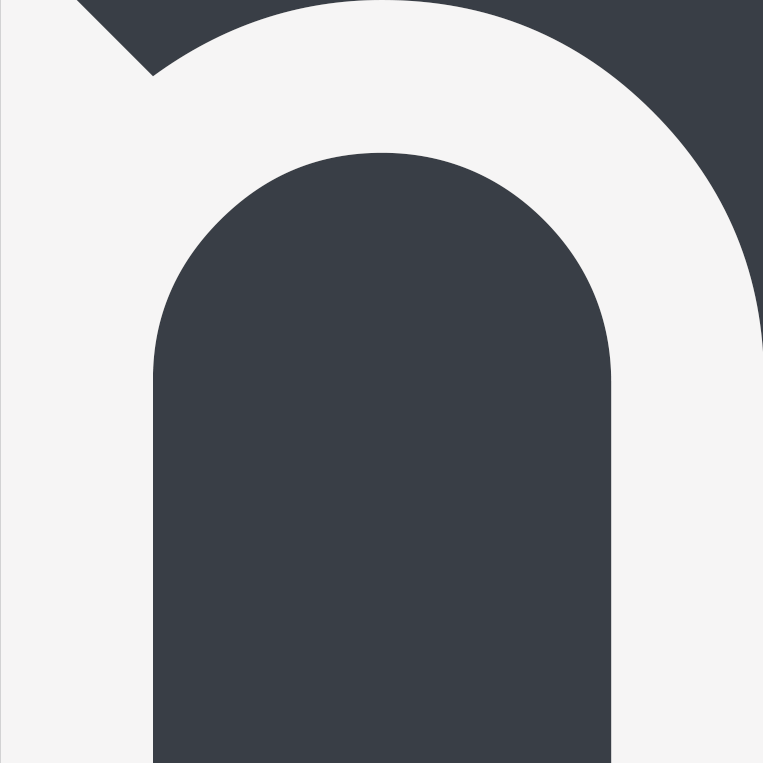
<style>
.page{position:relative;width:763px;height:763px;background:#393e46}
.page>*{position:absolute;margin:0}
.t1{font:1527.8px "Stark";letter-spacing:-0.025em;color:#f6f5f5}
</style>
<div class="page">
<p class="t1" style="left:0px;top:0px;width:764px;height:764px">n</p>
</div>
